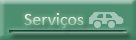
<style>
.page{position:relative;width:136px;height:40px}
.page>*{position:absolute;margin:0}
.t1{font:18px "Calibri"}
</style>
<div class="page">
<p class="t1" style="left:24px;top:13px;width:60px;height:15px">Serviços</p>
</div>
